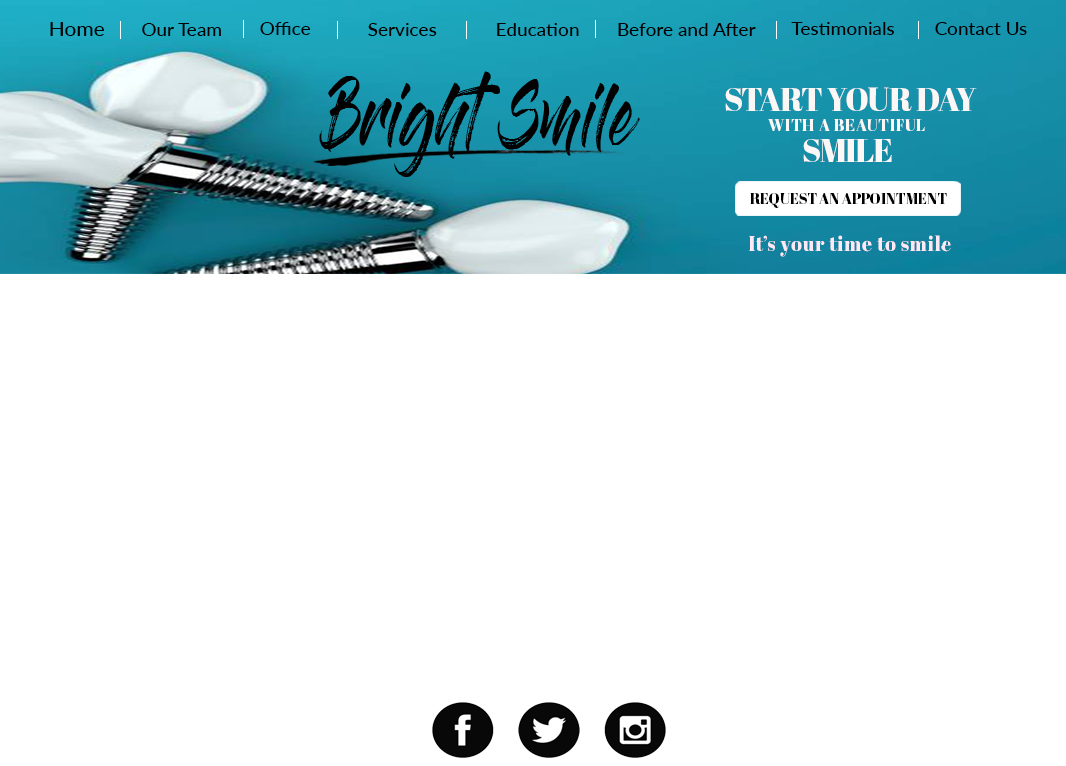
<style>
.page{position:relative;width:1066px;height:766px;background:#ffffff}
.page>*{position:absolute;margin:0}
.t1{font:20px "Lato-Medium";color:#030001;scale:1.04 1}
.t2{font:18px "Lato-Medium";color:#030001;scale:1.07 1}
.t3{font:63.4px "GlossAndBloom";color:#030001;scale:0.78 1}
.t4{font:33px "AbrilFatface-Regular";letter-spacing:-0.02em;color:#fcf7f7}
.t5{font:16.5px "AbrilFatface-Regular";letter-spacing:0.04em;color:#fcf7f7}
.t6{font:33px "AbrilFatface-Regular";letter-spacing:-0.04em;color:#fcf7f7}
.t7{font:15.4px "AbrilFatface-Regular";letter-spacing:-0.02em;color:#000000}
.t8{font:20.9px "AbrilFatface-Regular";letter-spacing:0.04em;color:#fce9f5;scale:0.92 1}
</style>
<div class="page">
<p class="t1" style="left:50px;top:22px;width:54px;height:14px">Home</p>
<p class="t2" style="left:142px;top:23px;width:79px;height:13px">Our Team</p>
<p class="t2" style="left:260px;top:22px;width:51px;height:13px">Office</p>
<p class="t2" style="left:368px;top:23px;width:69px;height:13px">Services</p>
<p class="t2" style="left:497px;top:23px;width:82px;height:13px">Education</p>
<p class="t2" style="left:618px;top:23px;width:138px;height:13px">Before and After</p>
<p class="t2" style="left:791px;top:22px;width:103px;height:13px">Testimonials</p>
<p class="t2" style="left:935px;top:22px;width:92px;height:13px">Contact Us</p>
<p class="t3" style="left:319px;top:71px;width:321px;height:106px">Bright Smile</p>
<p class="t4" style="left:725px;top:87px;width:252px;height:24px">START YOUR DAY</p>
<p class="t5" style="left:768px;top:119px;width:157px;height:12px">WITH A BEAUTIFUL</p>
<p class="t6" style="left:803px;top:139px;width:89px;height:23px">SMILE</p>
<p class="t7" style="left:750px;top:193px;width:197px;height:15px">REQUEST AN APPOINTMENT</p>
<p class="t8" style="left:749px;top:235px;width:202px;height:22px">It’s your time to smile</p>
</div>
